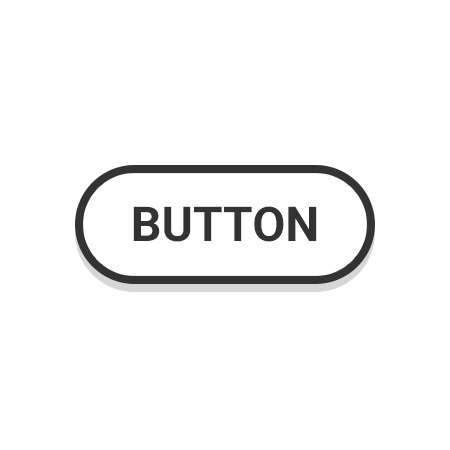
<style>
.page{position:relative;width:450px;height:450px;background:#ffffff}
.page>*{position:absolute;margin:0}
.t1{font:48px "Roboto-Bold";color:#333333}
</style>
<div class="page">
<p class="t1" style="left:133px;top:206px;width:184px;height:36px">BUTTON</p>
</div>
